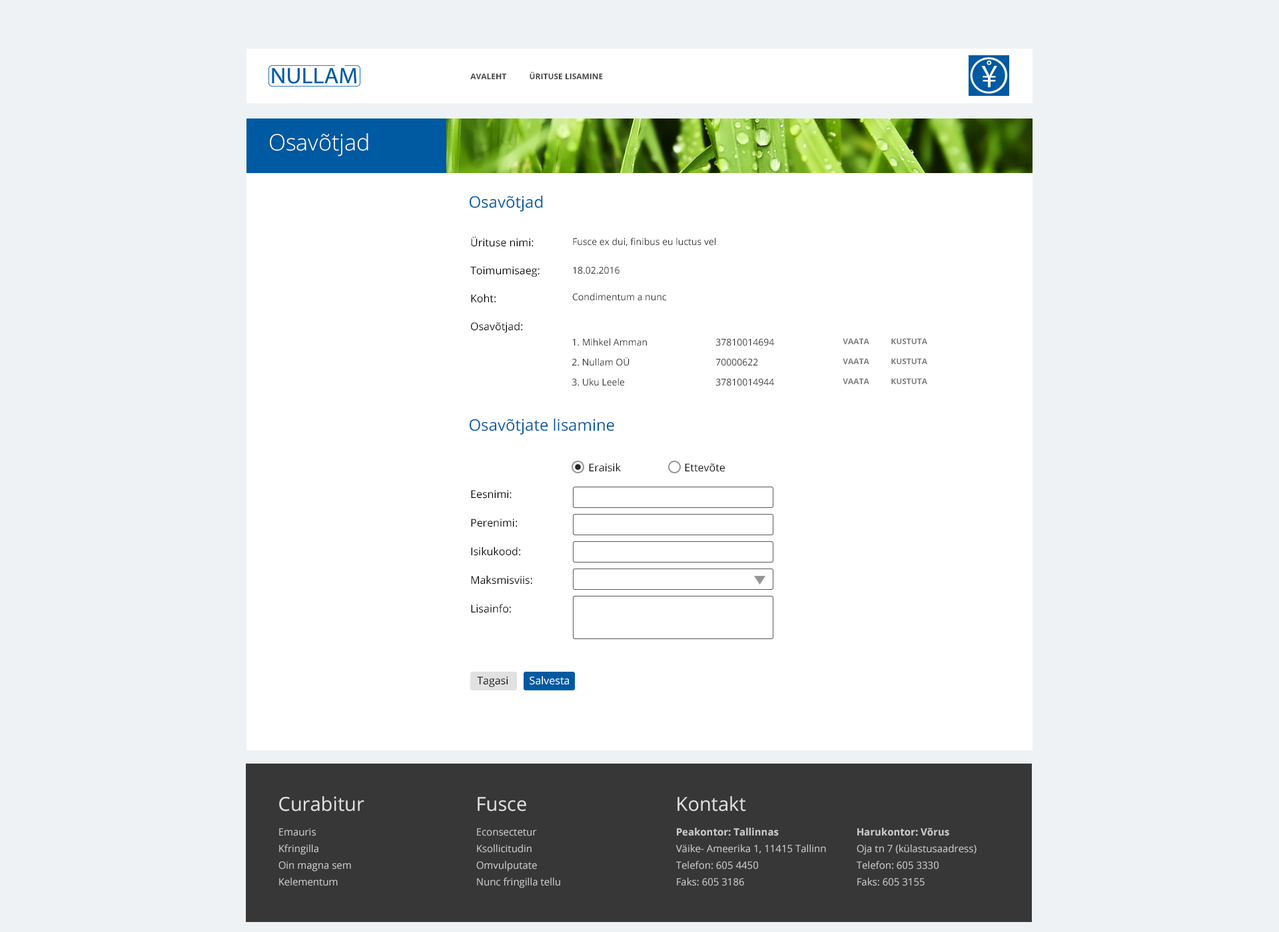
<style>
.page{position:relative;width:1279px;height:932px;background:#eff2f4}
.page>*{position:absolute;margin:0}
.t1{font:8px "OpenSans-Bold";color:#424242;text-transform:uppercase}
.t2{font:22.6px "OpenSans-Light";color:#ffffff}
.t3{font:16px "OpenSans";color:#005aa1}
.t4{font:10.7px/28px "OpenSans";color:#000000}
.t5{font:9.3px "OpenSans";color:#2f2f2f}
.t6{font:9.3px/20px "OpenSans";color:#2f2f2f}
.t7{font:9.3px/12px "OpenSans";color:#2f2f2f}
.t8{font:8px/20px "OpenSans-Bold";color:#7e7e7e;text-transform:uppercase}
.t9{font:10.7px "OpenSans";color:#000000}
.t10{font:10.6px/28.6px "OpenSans";color:#000000}
.t11{font:10.6px/28px "OpenSans";color:#000000}
.t12{font:10.7px "OpenSans";color:#ffffff}
.t13{font:19.3px "OpenSans";color:#e0e0e0}
.t14{font:10px/16.7px "OpenSans";color:#cbcbcb}
.t15{font:10px/16.7px "OpenSans-Bold";color:#cbcbcb}
</style>
<div class="page">
<p class="t1" style="left:470px;top:72px;width:133px;height:7px">Avaleht           Ürituse lisamine</p>
<p class="t2" style="left:270px;top:133px;width:98px;height:24px">Osavõtjad</p>
<p class="t3" style="left:470px;top:195px;width:73px;height:17px">Osavõtjad</p>
<p class="t4" style="left:470px;top:236px;width:69px;height:97px">Ürituse nimi:<br>Toimumisaeg:<br>Koht:<br>Osavõtjad:</p>
<p class="t5" style="left:573px;top:238px;width:142px;height:8px">Fusce ex dui, finibus eu luctus vel</p>
<p class="t5" style="left:573px;top:266px;width:46px;height:8px">18.02.2016</p>
<p class="t5" style="left:572px;top:293px;width:94px;height:8px">Condimentum a nunc</p>
<p class="t6" style="left:572px;top:338px;width:202px;height:48px">1. Mihkel Amman   37810014694  <br>2. Nullam OÜ    70000622<br>3. <span class="t7">Uku Leele    37810014944</span></p>
<p class="t8" style="left:843px;top:338px;width:84px;height:46px;text-align:center">vaata  kustuta<br>vaata kustuta<br>vaata kustuta</p>
<p class="t3" style="left:470px;top:418px;width:144px;height:17px">Osavõtjate lisamine</p>
<p class="t9" style="left:589px;top:463px;width:136px;height:9px">Eraisik   Ettevõte</p>
<p class="t10" style="left:471px;top:490px;width:61px;height:123px"><span class="t11"><br></span>Eesnimi:<br>Perenimi:<br>Isikukood:<br>Maksmisviis:<br>Lisainfo:</p>
<p class="t9" style="left:477px;top:677px;width:31px;height:10px">Tagasi</p>
<p class="t12" style="left:530px;top:676px;width:39px;height:9px">Salvesta</p>
<p class="t13" style="left:279px;top:797px;width:85px;height:15px">Curabitur</p>
<p class="t13" style="left:478px;top:797px;width:48px;height:15px">Fusce</p>
<p class="t13" style="left:677px;top:797px;width:69px;height:15px">Kontakt</p>
<p class="t14" style="left:278px;top:829px;width:73px;height:58px">Emauris<br>Kfringilla<br>Oin magna sem<br>Kelementum</p>
<p class="t14" style="left:476px;top:829px;width:84px;height:60px">Econsectetur <br>Ksollicitudin <br>Omvulputate <br>Nunc fringilla tellu</p>
<p class="t14" style="left:675px;top:828px;width:151px;height:59px"><span class="t15">Peakontor: Tallinnas<br></span>Väike- Ameerika 1, 11415 Tallinn<br>Telefon: 605 4450<br>Faks: 605 3186</p>
<p class="t14" style="left:857px;top:828px;width:119px;height:59px"><span class="t15">Harukontor: Võrus<br></span>Oja tn 7 (külastusaadress)<br>Telefon: 605 3330<br>Faks: 605 3155</p>
</div>
